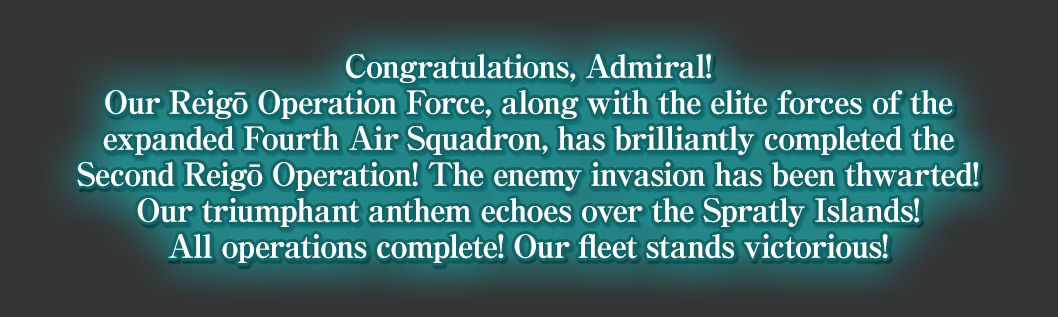
<style>
.page{position:relative;width:1058px;height:317px;background:#333333}
.page>*{position:absolute;margin:0}
.t1{font:32px/36px "RyuminPro-ExBold";letter-spacing:-0.04em;color:#ffffff}
</style>
<div class="page">
<p class="t1" style="left:77px;top:54px;width:902px;height:209px;text-align:center">Congratulations, Admiral!<br>Our Reigō Operation Force, along with the elite forces of the<br>expanded Fourth Air Squadron, has brilliantly completed the<br>Second Reigō Operation! The enemy invasion has been thwarted!<br>Our triumphant anthem echoes over the Spratly Islands!<br>All operations complete! Our fleet stands victorious!</p>
</div>
